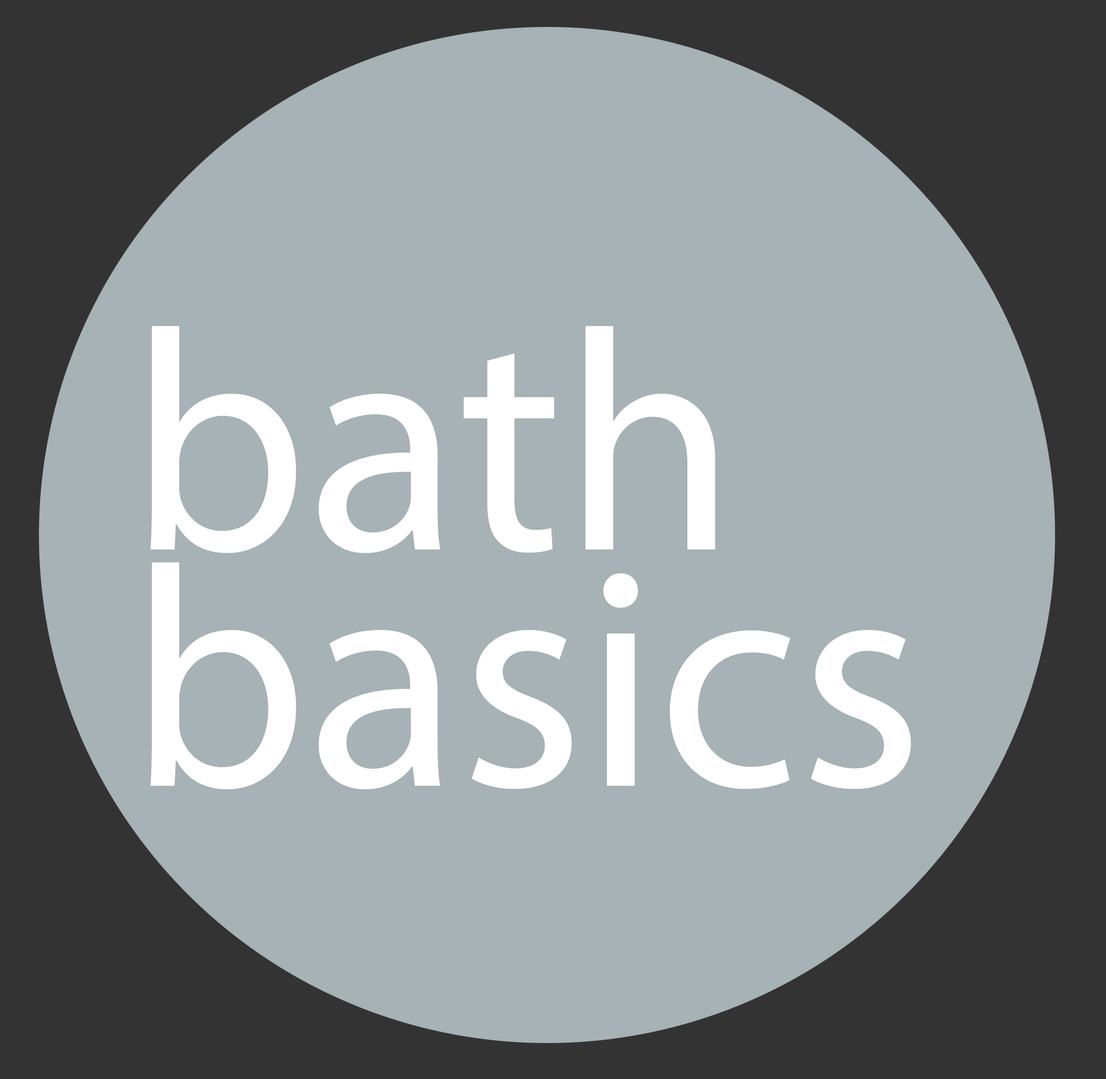
<style>
.page{position:relative;width:1106px;height:1079px;background:#a6b2b5}
.page>*{position:absolute;margin:0}
.t1{font:314.5px/236.3px "MyriadPro-Regular";color:#ffffff}
</style>
<div class="page">
<p class="t1" style="left:150px;top:326px;width:761px;height:463px">bath<br>basics</p>
</div>
